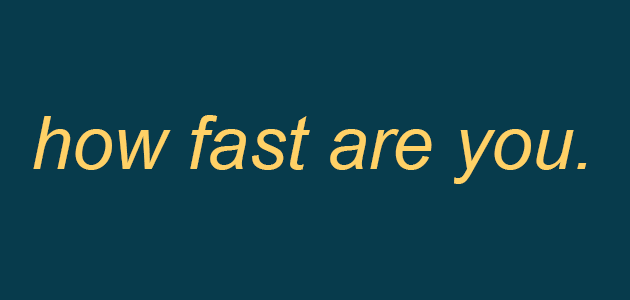
<style>
.page{position:relative;width:630px;height:300px;background:#073b4c}
.page>*{position:absolute;margin:0}
.t1{font:74px "Arial-ItalicMT";color:#ffd166}
</style>
<div class="page">
<p class="t1" style="left:33px;top:115px;width:554px;height:69px">how fast are you.</p>
</div>
